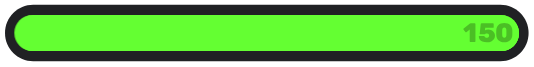
<style>
.page{position:relative;width:534px;height:67px;background:#64ff32}
.page>*{position:absolute;margin:0}
.t1{font:26.7px "Rubik-ExtraBold";color:#4bbf25}
</style>
<div class="page">
<p class="t1" style="left:463px;top:23px;width:50px;height:20px">150</p>
</div>
